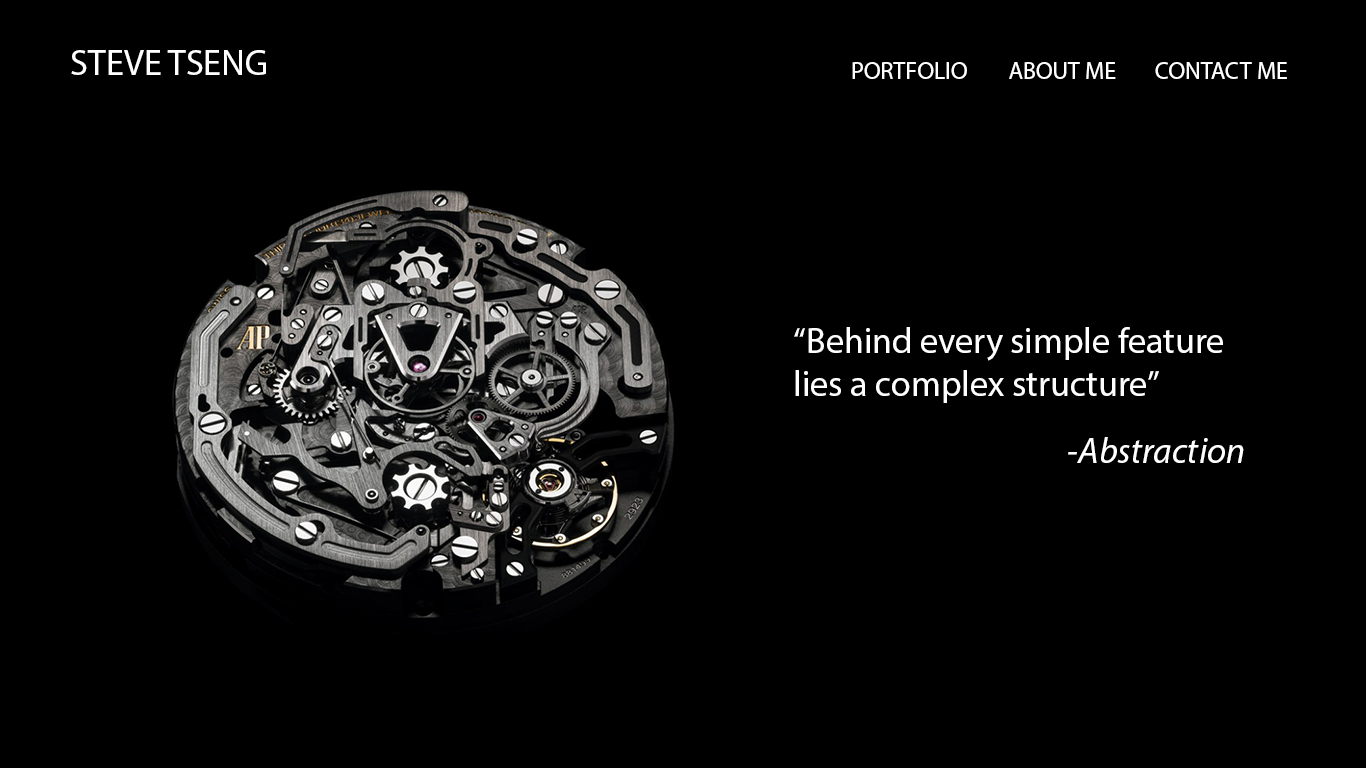
<style>
.page{position:relative;width:1366px;height:768px;background:#000000}
.page>*{position:absolute;margin:0}
.t1{font:36px "MyriadPro-Regular";color:#ffffff}
.t2{font:24px "MyriadPro-Regular";color:#ffffff}
.t3{font:36px "MyriadPro-It";color:#ffffff}
</style>
<div class="page">
<p class="t1" style="left:71px;top:50px;width:195px;height:25px">STEVE TSENG</p>
<p class="t2" style="left:852px;top:62px;width:115px;height:17px">PORTFOLIO</p>
<p class="t2" style="left:1009px;top:62px;width:107px;height:17px">ABOUT ME</p>
<p class="t2" style="left:1155px;top:62px;width:132px;height:17px">CONTACT ME</p>
<p class="t1" style="left:794px;top:327px;width:429px;height:76px">“Behind every simple feature<br>lies a complex structure”</p>
<p class="t3" style="left:1068px;top:437px;width:176px;height:26px">-Abstraction</p>
</div>
